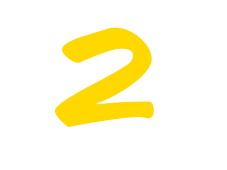
<style>
.page{position:relative;width:227px;height:170px;background:#ffffff}
.page>*{position:absolute;margin:0}
.t1{font:137px "ComicBook";color:#ffd800;scale:1.19 1}
</style>
<div class="page">
<p class="t1" style="left:55px;top:27px;width:99px;height:100px">2</p>
</div>
